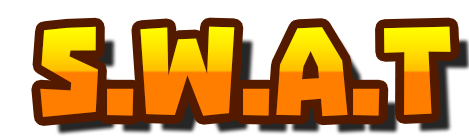
<style>
.page{position:relative;width:469px;height:139px;background:#ffffff}
.page>*{position:absolute;margin:0}
.t1{font:140.4px "Millennia1"}
</style>
<div class="page">
<p class="t1" style="left:40px;top:26px;width:411px;height:91px">S.W.A.T</p>
</div>
